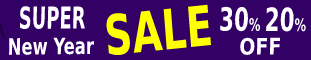
<style>
.page{position:relative;width:311px;height:60px;background:#330066}
.page>*{position:absolute;margin:0}
.t1{font:30.2px "DejaVuSansCondensed-Bold";color:#ffffff;scale:0.66 1}
.t2{font:55.4px "DejaVuSansCondensed-Bold";color:#ffff00;scale:0.77 1}
.t3{font:32.1px "DejaVuSansCondensed-Bold";color:#ffffff;scale:0.75 1}
.t4{font:17.4px "DejaVuSansCondensed-Bold";color:#ffffff;scale:0.75 1}
.t5{font:22.7px "DejaVuSansCondensed-Bold";color:#ffffff;scale:0.81 1}
.t6{font:22.7px "DejaVuSansCondensed-Bold";color:#ffffff;scale:0.93 1}
</style>
<div class="page">
<p class="t1" style="left:20px;top:6px;width:65px;height:23px">SUPER</p>
<p class="t2" style="left:106px;top:4px;width:105px;height:51px;rotate:-6deg">SALE</p>
<p class="t3" style="left:220px;top:6px;width:86px;height:26px">30<span class="t4">% </span>20<span class="t4">%</span></p>
<p class="t5" style="left:9px;top:37px;width:85px;height:18px;rotate:-1deg">New Year</p>
<p class="t6" style="left:240px;top:37px;width:40px;height:18px">OFF</p>
</div>
